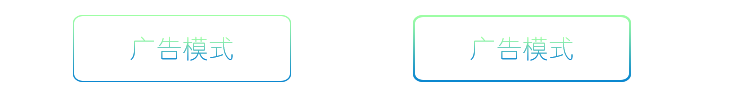
<style>
.page{position:relative;width:750px;height:100px;background:#ffffff}
.page>*{position:absolute;margin:0}
.t1{font:25px "-y-u-a-n-g-1";letter-spacing:0.05em;color:#6fd8b2}
</style>
<div class="page">
<p class="t1" style="left:130px;top:36px;width:103px;height:25px">广告模式</p>
<p class="t1" style="left:470px;top:36px;width:103px;height:25px">广告模式</p>
</div>
